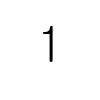
<style>
.page{position:relative;width:100px;height:100px;background:#ffffff}
.page>*{position:absolute;margin:0}
.t1{font:50px "Gulim";color:#000000}
</style>
<div class="page">
<p class="t1" style="left:43px;top:26px;width:10px;height:36px">1</p>
</div>
